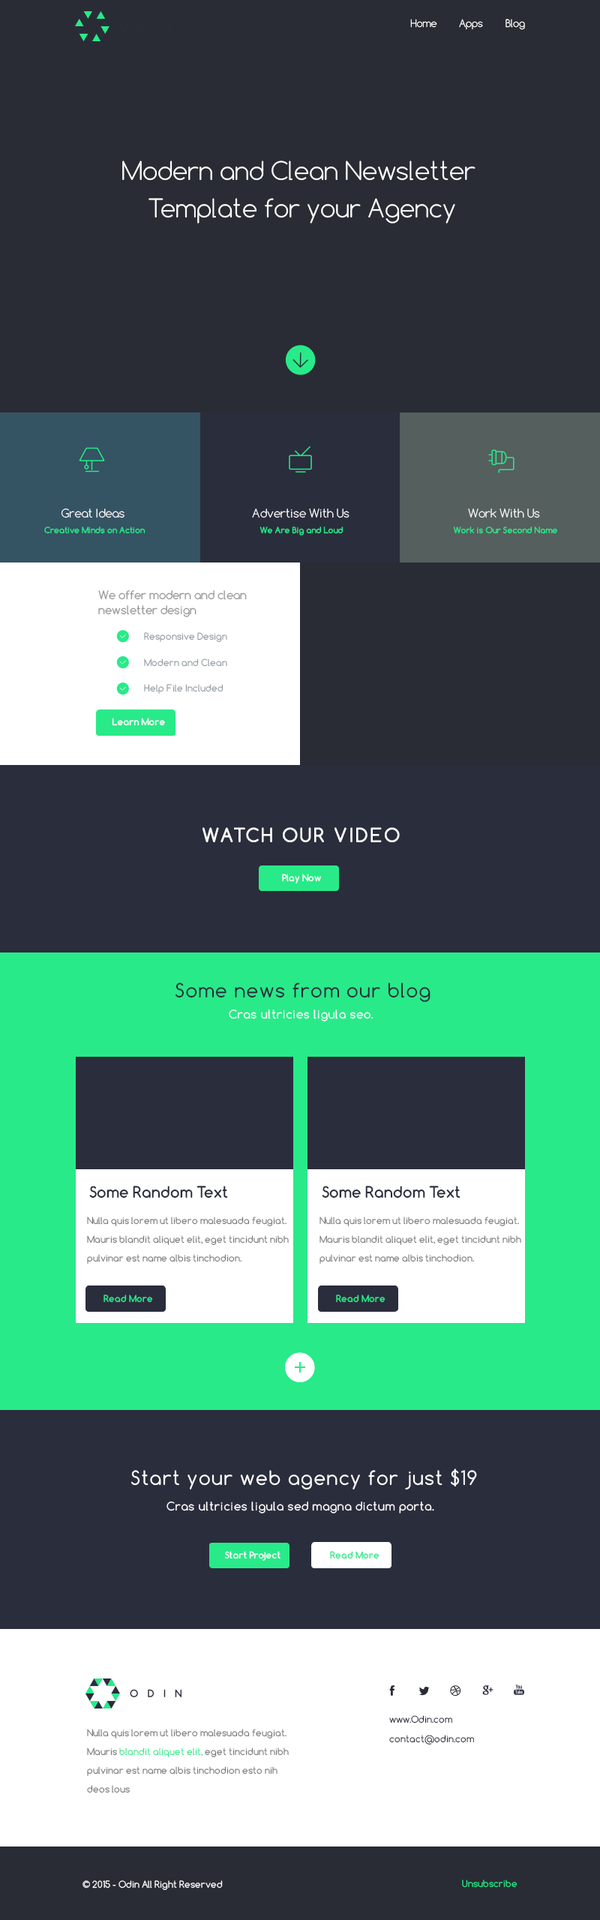
<style>
.page{position:relative;width:600px;height:1920px;background:#292c34}
.page>*{position:absolute;margin:0}
.t1{font:9.8px "Comfortaa-Light";color:#ffffff}
.t2{font:24.3px/37.5px "Comfortaa-Light";color:#ffffff}
.t3{font:11.2px "Comfortaa-Light";color:#ffffff}
.t4{font:8.2px "Comfortaa-Bold";color:#28ea89}
.t5{font:11.2px/15px "Comfortaa-Regular";color:#999999}
.t6{font:9px "Comfortaa-Regular";color:#919b9f}
.t7{font:9px "Comfortaa-Bold";color:#ffffff}
.t8{font:18.8px "Comfortaa-Bold";letter-spacing:0.1em;color:#ffffff}
.t9{font:18.8px "Comfortaa-Regular";letter-spacing:0.05em;color:#2a2d3c}
.t10{font:11.2px "Comfortaa-Regular";letter-spacing:0.05em;color:#ffffff}
.t11{font:15px "Comfortaa-Bold";color:#2a2d3c}
.t12{font:9px/18.8px "Comfortaa-Regular";color:#777777}
.t13{font:9px "Comfortaa-Bold";color:#28ea89}
.t14{font:18.8px "Comfortaa-Regular";letter-spacing:0.05em;color:#ffffff}
.t15{font:9px "Comfortaa-Regular";color:#2a2d3c}
.t16{font:9px/18.8px "Comfortaa-Regular";color:#28ea89}
.t17{font:9px "Comfortaa-Regular";color:#ffffff}
.t18{font:9px "Comfortaa-Regular";color:#28ea89}
</style>
<div class="page">
<p class="t1" style="left:410px;top:19px;width:27px;height:9px">Home</p>
<p class="t1" style="left:459px;top:19px;width:24px;height:11px">Apps</p>
<p class="t1" style="left:506px;top:19px;width:19px;height:11px">Blog</p>
<p class="t2" style="left:122px;top:160px;width:354px;height:64px;text-align:center">Modern and Clean Newsletter <br>Template for your Agency</p>
<p class="t3" style="left:61px;top:508px;width:63px;height:10px">Great Ideas</p>
<p class="t3" style="left:252px;top:508px;width:98px;height:10px">Advertise With Us</p>
<p class="t3" style="left:468px;top:508px;width:72px;height:10px">Work With Us</p>
<p class="t4" style="left:44px;top:526px;width:102px;height:8px">Creative Minds on Action</p>
<p class="t4" style="left:260px;top:526px;width:84px;height:10px">We Are Big and Loud</p>
<p class="t4" style="left:453px;top:526px;width:105px;height:8px">Work is Our Second Name</p>
<p class="t5" style="left:98px;top:590px;width:149px;height:27px">We offer modern and clean<br>newsletter design</p>
<p class="t6" style="left:144px;top:632px;width:83px;height:10px">Responsive Design</p>
<p class="t6" style="left:144px;top:658px;width:83px;height:9px">Modern and Clean</p>
<p class="t6" style="left:144px;top:684px;width:80px;height:10px">Help File Included</p>
<p class="t7" style="left:112px;top:718px;width:53px;height:8px">Learn More</p>
<p class="t8" style="left:202px;top:827px;width:198px;height:15px">WATCH OUR VIDEO</p>
<p class="t7" style="left:282px;top:874px;width:39px;height:10px">Play Now</p>
<p class="t9" style="left:176px;top:982px;width:254px;height:20px">Some news from our blog</p>
<p class="t10" style="left:229px;top:1010px;width:145px;height:12px">Cras ultricies ligula seo.</p>
<p class="t11" style="left:89px;top:1186px;width:139px;height:12px">Some Random Text</p>
<p class="t11" style="left:322px;top:1186px;width:138px;height:12px">Some Random Text</p>
<p class="t12" style="left:87px;top:1216px;width:202px;height:48px">Nulla quis lorem ut libero malesuada feugiat. <br>Mauris blandit aliquet elit, eget tincidunt nibh <br>pulvinar est name albis tinchodion.</p>
<p class="t12" style="left:320px;top:1216px;width:201px;height:48px">Nulla quis lorem ut libero malesuada feugiat. <br>Mauris blandit aliquet elit, eget tincidunt nibh <br>pulvinar est name albis tinchodion.</p>
<p class="t13" style="left:104px;top:1294px;width:49px;height:9px">Read More</p>
<p class="t13" style="left:336px;top:1294px;width:50px;height:9px">Read More</p>
<p class="t14" style="left:131px;top:1468px;width:346px;height:22px">Start your web agency for just $19</p>
<p class="t10" style="left:166px;top:1502px;width:268px;height:12px">Cras ultricies ligula sed magna dictum porta.</p>
<p class="t7" style="left:224px;top:1551px;width:56px;height:10px">Start Project</p>
<p class="t13" style="left:330px;top:1551px;width:50px;height:8px">Read More</p>
<p class="t15" style="left:389px;top:1715px;width:63px;height:9px">www.Odin.com</p>
<p class="t12" style="left:87px;top:1729px;width:202px;height:64px">Nulla quis lorem ut libero malesuada feugiat. <br>Mauris <span class="t16">blandit aliquet elit,</span> eget tincidunt nibh <br>pulvinar est name albis tinchodion esto nih <br>deos lous</p>
<p class="t15" style="left:389px;top:1735px;width:85px;height:9px">contact@odin.com</p>
<p class="t17" style="left:82px;top:1880px;width:141px;height:10px">© 2015 - Odin All Right Reserved</p>
<p class="t18" style="left:462px;top:1880px;width:56px;height:8px">Unsubscribe</p>
</div>
